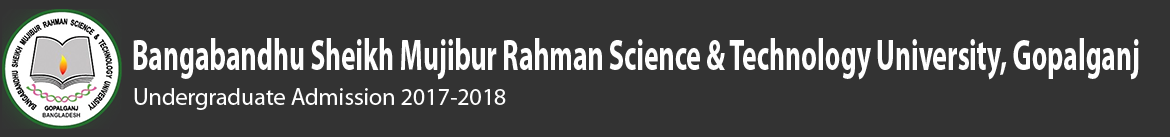
<style>
.page{position:relative;width:1170px;height:137px;background:#333333}
.page>*{position:absolute;margin:0}
.t1{font:44.2px "MyriadPro-Bold";color:#fefefe;scale:0.62 1}
.t2{font:24px "MyriadPro-Regular";color:#fefefe}
</style>
<div class="page">
<p class="t1" style="left:133px;top:38px;width:1006px;height:42px">Bangabandhu Sheikh Mujibur Rahman Science &amp; Technology University, Gopalganj</p>
<p class="t2" style="left:134px;top:88px;width:372px;height:22px">Undergraduate Admission 2017-2018</p>
</div>
